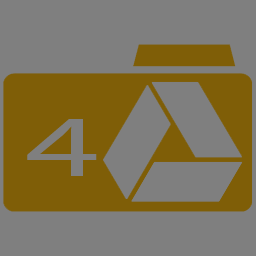
<style>
.page{position:relative;width:256px;height:256px;background:#7f7f7f}
.page>*{position:absolute;margin:0}
.t1{font:88.1px "MyriadPro-Regular";color:#7f7f7f;scale:1.65 1}
</style>
<div class="page">
<p class="t1" style="left:27px;top:119px;width:70px;height:57px">4</p>
</div>
